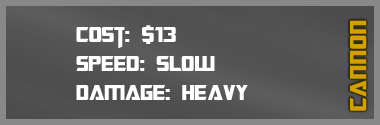
<style>
.page{position:relative;width:380px;height:125px}
.page>*{position:absolute;margin:0}
.t1{font:24px "TransformersMovie";color:#ffffff}
.t2{font:24px "TransformersMovie";letter-spacing:0.04em;color:#ffffff}
.t3{font:26px "TransformersMovie";letter-spacing:0.04em;color:#d49f00}
.t4{font:26px "TransformersMovie";letter-spacing:0.06em;color:#d49f00}
</style>
<div class="page">
<p class="t1" style="left:76px;top:25px;width:172px;height:75px">Cost: $13<br>Spee<span class="t2">d</span>: slow<br>Damage: heavy</p>
<p class="t3" style="left:350px;top:20px;width:17px;height:91px;rotate:-90deg">can<span class="t4">no</span>n</p>
</div>
